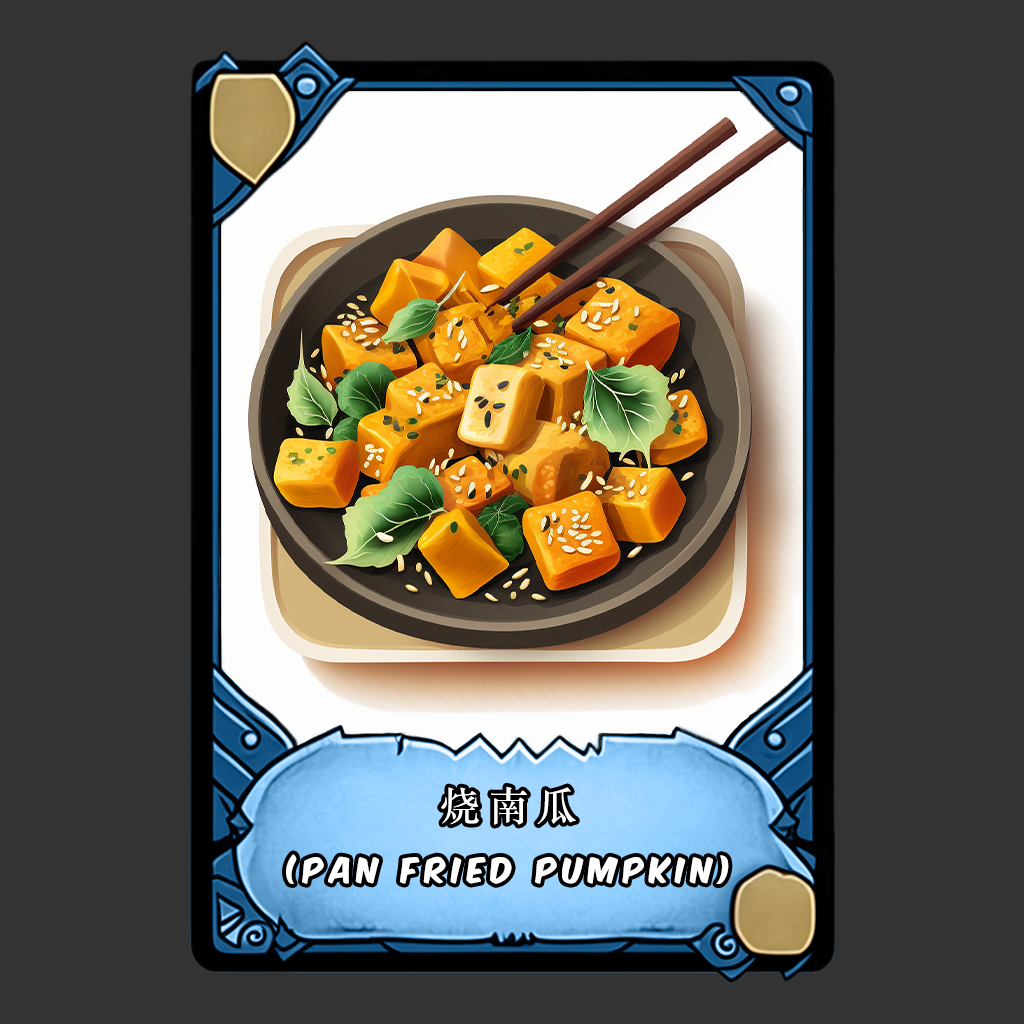
<style>
.page{position:relative;width:1024px;height:1024px;background:#333333}
.page>*{position:absolute;margin:0}
.t1{font:40px "STSongti-SC-Bold";letter-spacing:0.2em;color:#ffffff}
.t2{font:30px "KomikaAxis";letter-spacing:0.2em;color:#ffffff}
</style>
<div class="page">
<p class="t1" style="left:441px;top:786px;width:135px;height:39px">烧南瓜</p>
<p class="t2" style="left:286px;top:854px;width:443px;height:30px">(Pan fried pumpkin)</p>
</div>
